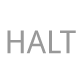
<style>
.page{position:relative;width:80px;height:80px;background:#ffffff}
.page>*{position:absolute;margin:0}
.t1{font:31.8px "DroidSans";color:#999999}
</style>
<div class="page">
<p class="t1" style="left:7px;top:30px;width:69px;height:24px">HALT</p>
</div>
